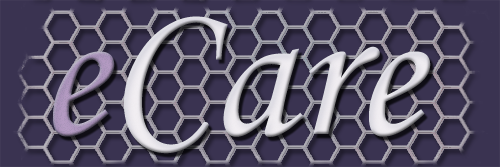
<style>
.page{position:relative;width:500px;height:167px;background:#3a3351}
.page>*{position:absolute;margin:0}
.t1{font:200px "MonotypeCorsiva";color:#eaeaea}
.t2{font:200px "MonotypeCorsiva";color:#8a849e}
</style>
<div class="page">
<p class="t1" style="left:53px;top:16px;width:378px;height:138px"><span class="t2">e</span>Care</p>
</div>
